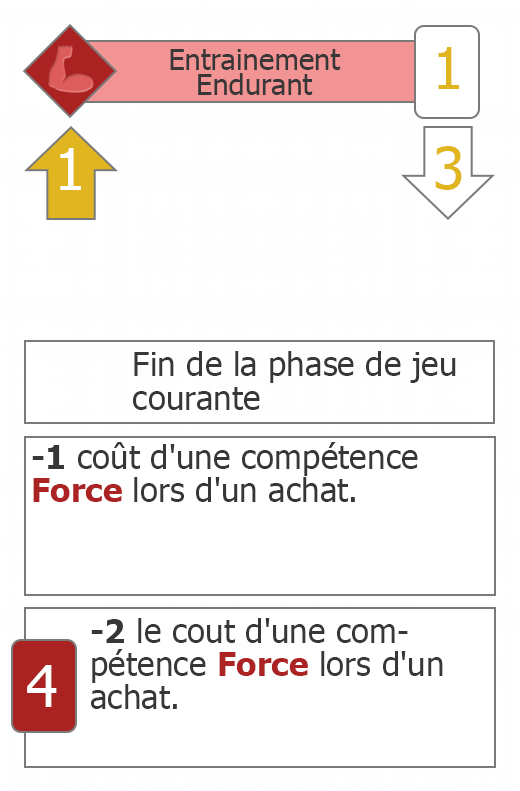
<style>
.page{position:relative;width:520px;height:791px;background:#ffffff}
.page>*{position:absolute;margin:0}
.t1{font:29.2px/25px "Tahoma";color:#373737}
.t2{font:58.3px "Tahoma";color:#e1b61f}
.t3{font:58.3px "Tahoma";color:#ffffff}
.t4{font:33.3px/33.3px "Tahoma";color:#373737}
.t5{font:33.3px/33.3px "Tahoma-Bold";color:#373737}
.t6{font:33.3px/33.3px "Tahoma-Bold";color:#ab2323}
</style>
<div class="page">
<p class="t1" style="left:170px;top:49px;width:171px;height:46px;text-align:center">Entrainement <br>Endurant</p>
<p class="t2" style="left:438px;top:47px;width:21px;height:42px">1</p>
<p class="t3" style="left:60px;top:148px;width:21px;height:42px">1</p>
<p class="t2" style="left:435px;top:146px;width:27px;height:44px">3</p>
<p class="t4" style="left:133px;top:351px;width:323px;height:59px">Fin de la phase de jeu courante</p>
<p class="t4" style="left:32px;top:442px;width:386px;height:60px"><span class="t5">-1</span> coût d'une compétence <span class="t6">Force </span>lors d'un achat.</p>
<p class="t4" style="left:91px;top:618px;width:352px;height:91px"><span class="t5">-2</span> le cout d'une compétence <span class="t6">Force </span>lors d'un achat.</p>
<p class="t3" style="left:27px;top:665px;width:30px;height:42px">4</p>
</div>
